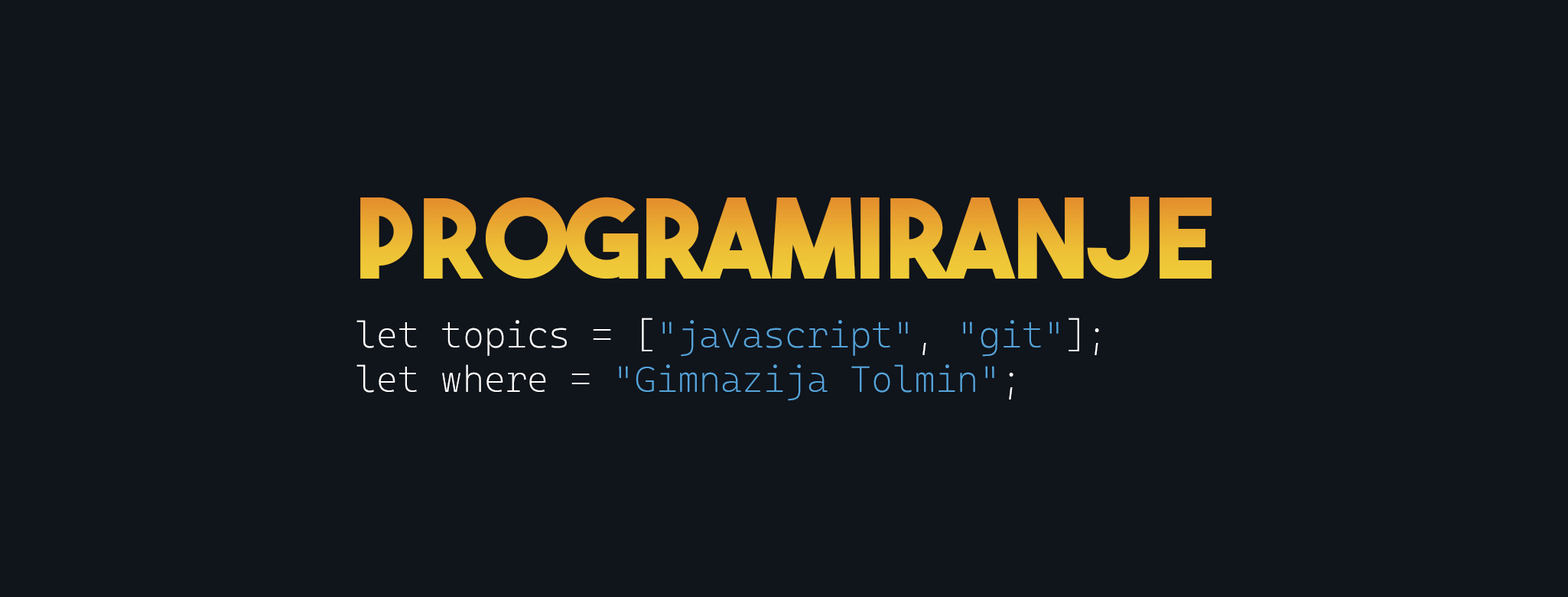
<style>
.page{position:relative;width:1568px;height:597px;background:#10141b}
.page>*{position:absolute;margin:0}
.t1{font:110.1px "TheBoldFont-Bold";color:#ecb835}
.t2{font:36.7px "CascadiaMonoRoman-ExtraLight";color:#55a4da}
.t3{font:36.7px "CascadiaMonoRoman-ExtraLight";color:#ffffff}
</style>
<div class="page">
<p class="t1" style="left:360px;top:197px;width:852px;height:81px">PROGRAMIRANJE</p>
<p class="t2" style="left:356px;top:317px;width:743px;height:84px"><span class="t3">let topics = [</span>"javascript"<span class="t3">, </span>"git"<span class="t3">];<br>let where = </span>"Gimnazija Tolmin"<span class="t3">;</span></p>
</div>
